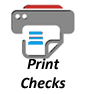
<style>
.page{position:relative;width:85px;height:94px;background:#ffffff}
.page>*{position:absolute;margin:0}
.t1{font:16px "Calibri-BoldItalic";color:#000000}
</style>
<div class="page">
<p class="t1" style="left:21px;top:58px;width:45px;height:31px;text-align:center">Print<br>Checks</p>
</div>
